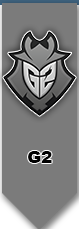
<style>
.page{position:relative;width:79px;height:229px;background:#7b7b7b}
.page>*{position:absolute;margin:0}
.t1{font:16.7px "Arial-Black";letter-spacing:-0.01em;color:#000000}
</style>
<div class="page">
<p class="t1" style="left:28px;top:151px;width:24px;height:12px">G2</p>
</div>
